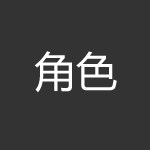
<style>
.page{position:relative;width:150px;height:150px;background:#333333}
.page>*{position:absolute;margin:0}
.t1{font:41.7px "MicrosoftYaHei";color:#ffffff}
</style>
<div class="page">
<p class="t1" style="left:34px;top:51px;width:83px;height:42px">角色</p>
</div>
